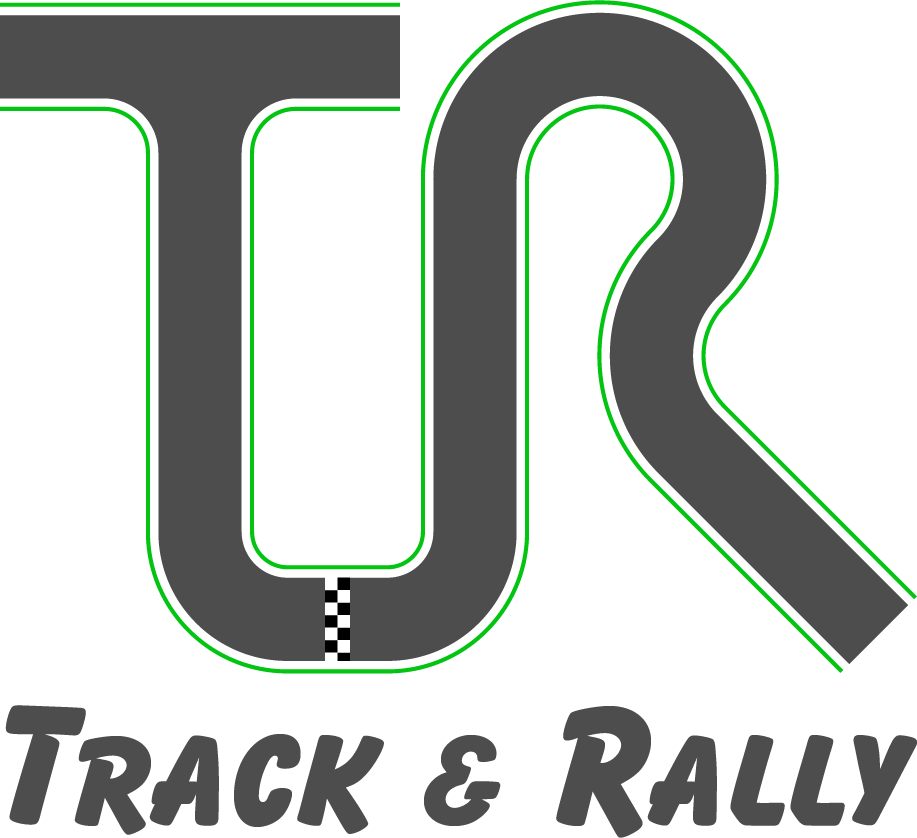
<style>
.page{position:relative;width:917px;height:838px;background:#ffffff}
.page>*{position:absolute;margin:0}
.t1{font:181.2px "BalloonSCD-ExtBol";letter-spacing:0.005em;color:#4d4d4d}
</style>
<div class="page">
<p class="t1" style="left:5px;top:705px;width:912px;height:133px">Track &amp; Rally</p>
</div>
